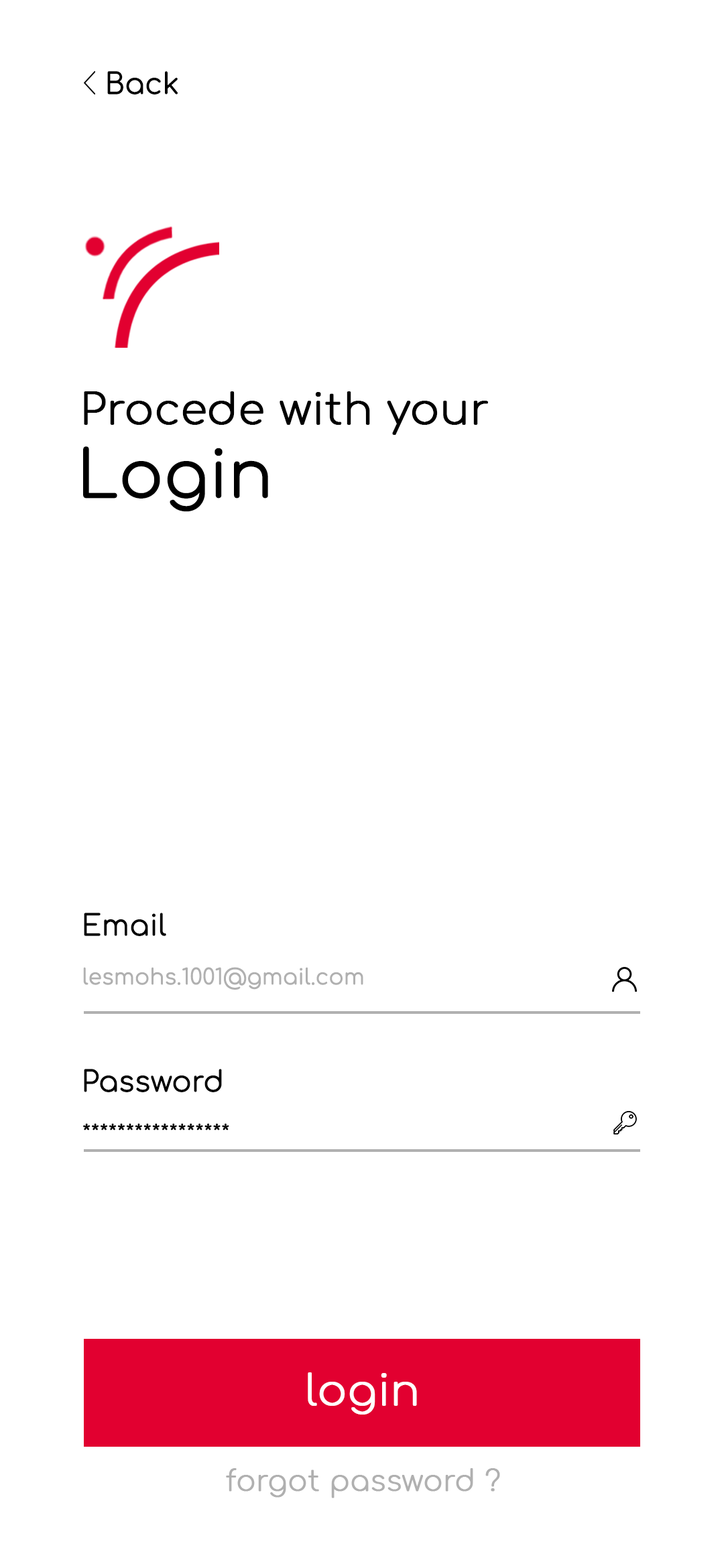
<style>
.page{position:relative;width:724px;height:1568px;background:#ffffff}
.page>*{position:absolute;margin:0}
.t1{font:28.4px "Comfortaa-Light";color:#000000;font-weight:bold}
.t2{font:42.6px "Comfortaa-Light";color:#000000;font-weight:bold}
.t3{font:63.8px "Comfortaa-Light";color:#000000;font-weight:bold}
.t4{font:21.3px "Comfortaa-Light";color:#b0b0b0;font-weight:bold}
.t5{font:21.3px "Comfortaa-Light";color:#000000;font-weight:bold}
.t6{font:42.6px "Comfortaa-Light";color:#ffffff;font-weight:bold}
.t7{font:28.4px "Comfortaa-Light";color:#b0b0b0;font-weight:bold}
</style>
<div class="page">
<p class="t1" style="left:107px;top:71px;width:71px;height:23px">Back</p>
<p class="t2" style="left:84px;top:391px;width:404px;height:44px">Procede with your</p>
<p class="t3" style="left:83px;top:446px;width:185px;height:66px">Login</p>
<p class="t1" style="left:84px;top:913px;width:82px;height:23px">Email</p>
<p class="t4" style="left:83px;top:967px;width:280px;height:23px">lesmohs.1001@gmail.com</p>
<p class="t1" style="left:84px;top:1069px;width:138px;height:23px">Password</p>
<p class="t5" style="left:83px;top:1123px;width:146px;height:7px">*****************</p>
<p class="t6" style="left:308px;top:1372px;width:109px;height:43px">login</p>
<p class="t7" style="left:226px;top:1468px;width:274px;height:30px">forgot password ?</p>
</div>
